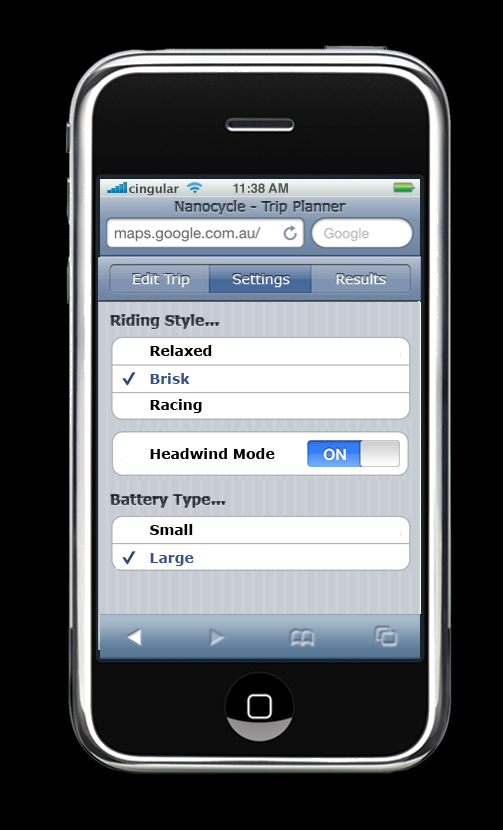
<style>
.page{position:relative;width:503px;height:830px;background:#000000}
.page>*{position:absolute;margin:0}
.t1{font:14px "Verdana";color:#ffffff}
.t2{font:14px "Verdana-Bold";color:#323a45}
.t3{font:14px "Verdana-Bold";color:#000000}
.t4{font:14px "Verdana-Bold";color:#385487}
</style>
<div class="page">
<p class="t1" style="left:133px;top:273px;width:57px;height:14px">Edit Trip</p>
<p class="t1" style="left:232px;top:274px;width:58px;height:13px">Settings</p>
<p class="t1" style="left:336px;top:273px;width:50px;height:11px">Results</p>
<p class="t2" style="left:111px;top:315px;width:108px;height:14px">Riding Style...</p>
<p class="t3" style="left:150px;top:345px;width:62px;height:11px">Relaxed</p>
<p class="t4" style="left:150px;top:373px;width:40px;height:11px">Brisk</p>
<p class="t3" style="left:150px;top:399px;width:52px;height:14px">Racing</p>
<p class="t3" style="left:150px;top:448px;width:125px;height:11px">Headwind Mode</p>
<p class="t2" style="left:111px;top:495px;width:114px;height:13px">Battery Type...</p>
<p class="t3" style="left:150px;top:524px;width:43px;height:11px">Small</p>
<p class="t4" style="left:150px;top:553px;width:44px;height:13px">Large</p>
</div>
